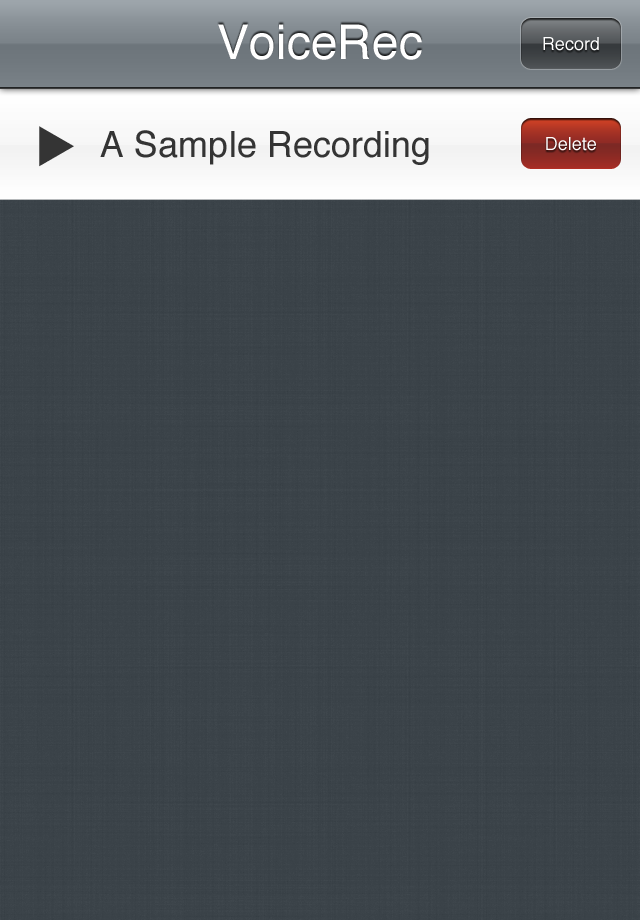
<style>
.page{position:relative;width:640px;height:920px;background:#3a4248}
.page>*{position:absolute;margin:0}
.t1{font:48px "Helvetica";color:#ffffff}
.t2{font:18px "Helvetica";color:#ffffff}
.t3{font:14px "Helvetica";color:#ffffff}
.t4{font:36px "Helvetica";color:#343434}
.t5{font:64px "AppleSymbols";letter-spacing:0.32em;color:#343434}
</style>
<div class="page">
<p class="t1" style="left:218px;top:24px;width:204px;height:36px">VoiceRec</p>
<p class="t2" style="left:543px;top:37px;width:56px;height:14px"><span class="t3"><br></span>Record</p>
<p class="t4" style="left:39px;top:126px;width:390px;height:41px"><span class="t5">▶</span>A Sample Recording</p>
<p class="t2" style="left:546px;top:137px;width:50px;height:14px"><span class="t3"><br></span>Delete</p>
</div>
